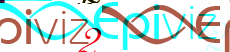
<style>
.page{position:relative;width:230px;height:52px;background:#ffffff}
.page>*{position:absolute;margin:0}
.t1{font:53px "BauhausITCbyBT-Medium";color:#1cffff;scale:1.05 1}
.t2{font:53px "BauhausITCbyBT-Light";color:#1cffff;scale:1.05 1}
</style>
<div class="page">
<p class="t1" style="left:93px;top:2px;width:124px;height:48px">Epi<span class="t2">viz</span></p>
</div>
